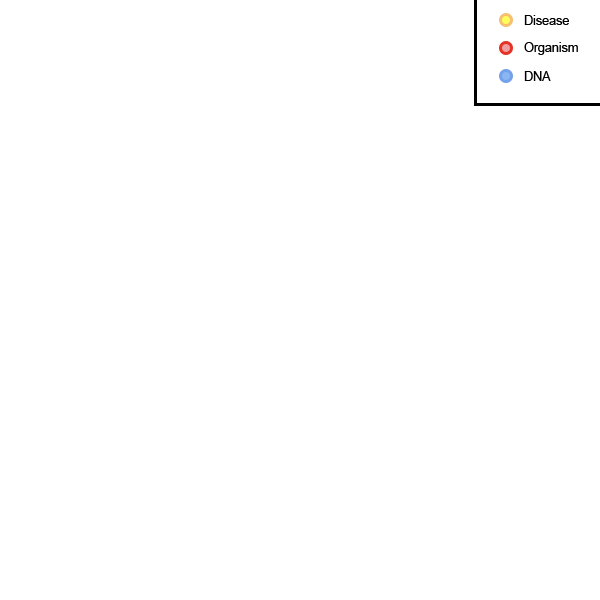
<style>
.page{position:relative;width:600px;height:600px;background:#ffffff}
.page>*{position:absolute;margin:0}
.t1{font:12.5px "ArialMT";color:#000000}
</style>
<div class="page">
<p class="t1" style="left:524px;top:15px;width:45px;height:10px">Disease</p>
<p class="t1" style="left:524px;top:42px;width:54px;height:13px">Organism</p>
<p class="t1" style="left:524px;top:71px;width:27px;height:10px">DNA</p>
</div>
